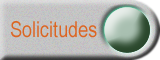
<style>
.page{position:relative;width:160px;height:60px}
.page>*{position:absolute;margin:0}
.t1{font:22px "ArialNarrow";color:#dc6623}
</style>
<div class="page">
<p class="t1" style="left:11px;top:21px;width:86px;height:17px">Solicitudes</p>
</div>
